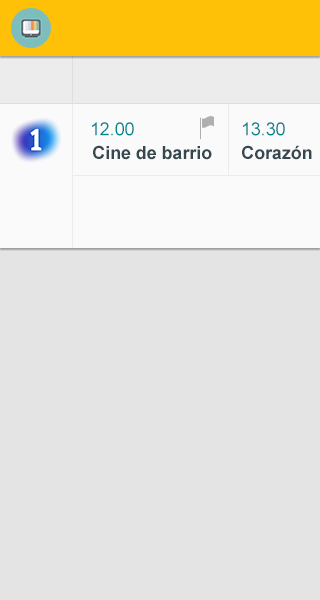
<style>
.page{position:relative;width:320px;height:600px;background:#e4e4e4}
.page>*{position:absolute;margin:0}
.t1{font:18px "ArialMT";letter-spacing:-0.005em;color:#00838f;font-variant:small-caps}
.t2{font:18px "Arial-BoldMT";letter-spacing:-0.005em;color:#37474f}
</style>
<div class="page">
<p class="t1" style="left:92px;top:122px;width:42px;height:14px">12.00</p>
<p class="t1" style="left:243px;top:122px;width:42px;height:14px">13.30</p>
<p class="t2" style="left:93px;top:145px;width:119px;height:15px">Cine de barrio</p>
<p class="t2" style="left:242px;top:145px;width:70px;height:15px">Corazón</p>
</div>
